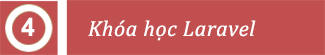
<style>
.page{position:relative;width:325px;height:55px;background:#c14f4f}
.page>*{position:absolute;margin:0}
.t1{font:24.9px "Arial-BoldMT";letter-spacing:0.025em;color:#ffffff}
.t2{font:22px "Cambria-Italic";letter-spacing:0.025em;color:#ffffff}
</style>
<div class="page">
<p class="t1" style="left:21px;top:17px;width:14px;height:19px">4</p>
<p class="t2" style="left:88px;top:20px;width:168px;height:21px">Khóa học Laravel</p>
</div>
